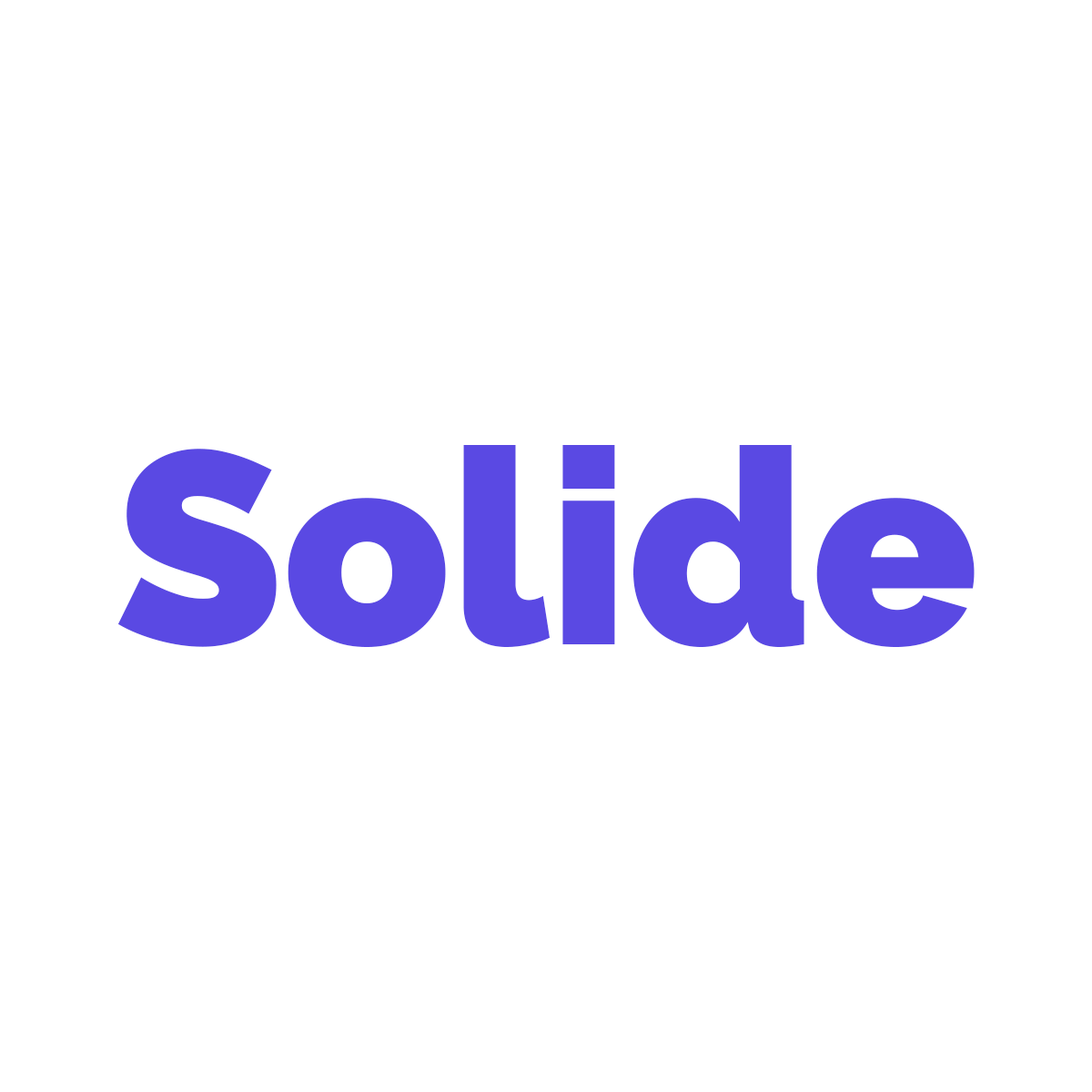
<style>
.page{position:relative;width:1092px;height:1092px;background:#ffffff}
.page>*{position:absolute;margin:0}
.t1{font:273px "Raleway-Heavy";color:#5a49e3}
</style>
<div class="page">
<p class="t1" style="left:117px;top:445px;width:858px;height:202px">Solide</p>
</div>
